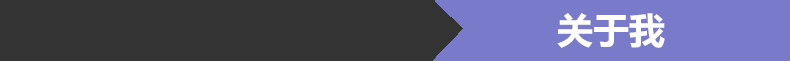
<style>
.page{position:relative;width:790px;height:61px;background:#333333}
.page>*{position:absolute;margin:0}
.t1{font:36px "MicrosoftYaHei-Bold";color:#ffffff}
</style>
<div class="page">
<p class="t1" style="left:557px;top:13px;width:108px;height:35px">关于我</p>
</div>
